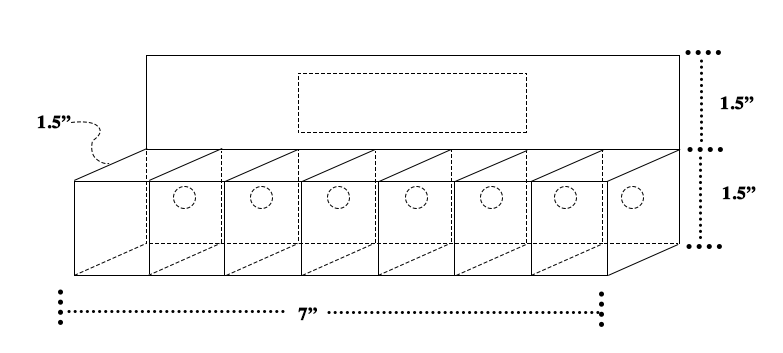
<style>
.page{position:relative;width:783px;height:353px;background:#ffffff}
.page>*{position:absolute;margin:0}
.t1{font:18px "Times-Bold";letter-spacing:0.01em;color:#000000;font-weight:bold}
</style>
<div class="page">
<p class="t1" style="left:720px;top:96px;width:34px;height:14px">1.5”</p>
<p class="t1" style="left:37px;top:115px;width:34px;height:14px">1.5”</p>
<p class="t1" style="left:722px;top:186px;width:34px;height:14px">1.5”</p>
<p class="t1" style="left:298px;top:307px;width:19px;height:14px">7”</p>
</div>
